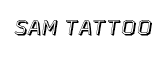
<style>
.page{position:relative;width:162px;height:57px;background:#ffffff}
.page>*{position:absolute;margin:0}
.t1{font:29.2px "AAAWatinBold3DItalic";color:#000000}
</style>
<div class="page">
<p class="t1" style="left:14px;top:20px;width:138px;height:16px">SAM TATTOO</p>
</div>
